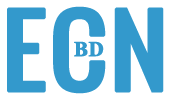
<style>
.page{position:relative;width:169px;height:99px;background:#ffffff}
.page>*{position:absolute;margin:0}
.t1{font:93.7px "Oswald-Regular";letter-spacing:0.01em;color:#3399cc;font-weight:bold;scale:1.11 1}
.t2{font:20.8px "TimesNewRomanPS-BoldMT";letter-spacing:0.01em;color:#3399cc;font-weight:bold}
</style>
<div class="page">
<p class="t1" style="left:7px;top:6px;width:157px;height:88px">ECN</p>
<p class="t2" style="left:74px;top:41px;width:30px;height:16px">BD</p>
</div>
